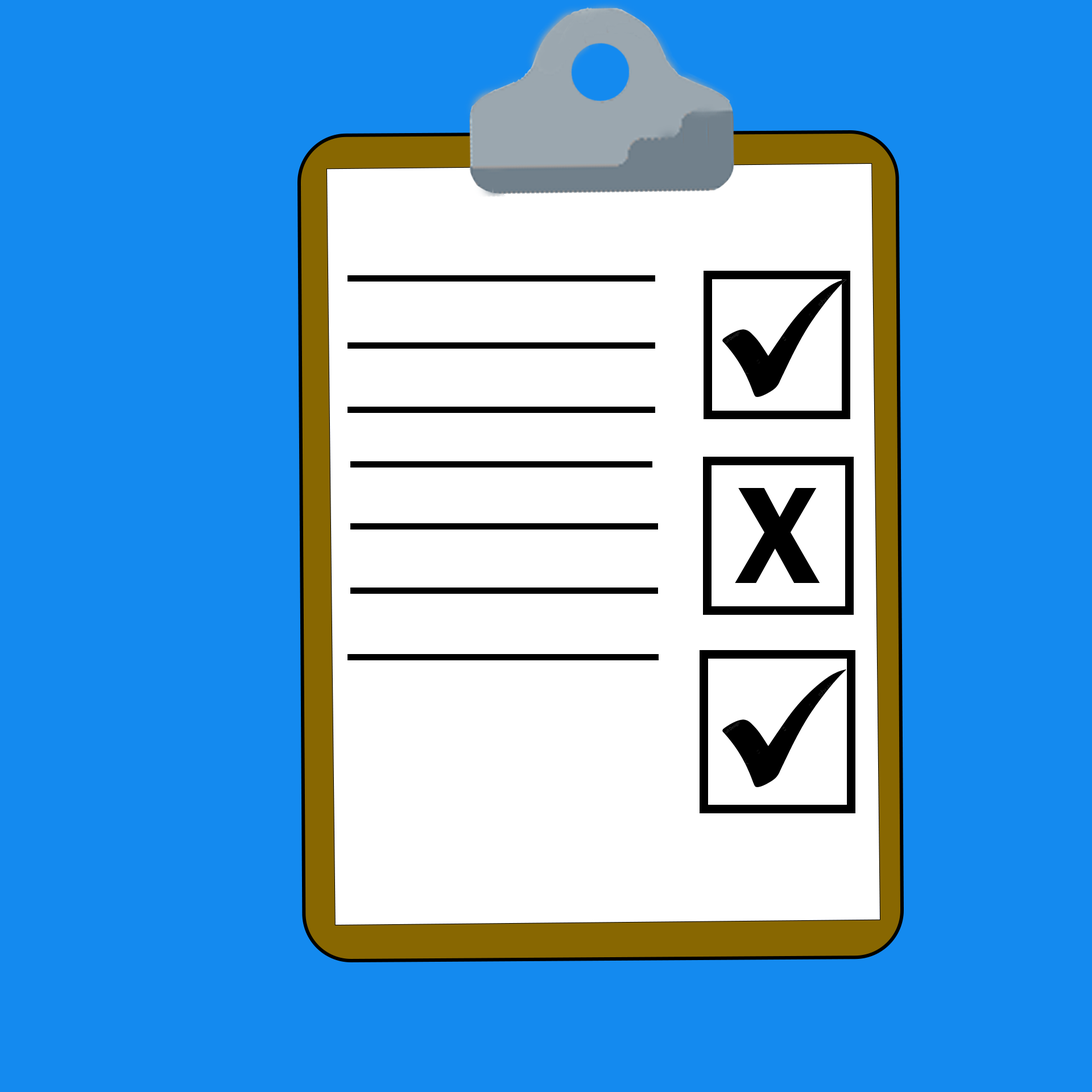
<style>
.page{position:relative;width:1092px;height:1092px;background:#148aef}
.page>*{position:absolute;margin:0}
.t1{font:142.2px "FranklinGothic-Demi";color:#000000}
</style>
<div class="page">
<p class="t1" style="left:735px;top:488px;width:85px;height:95px">X</p>
</div>
